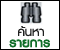
<style>
.page{position:relative;width:60px;height:50px;background:#ffffff}
.page>*{position:absolute;margin:0}
.t1{font:18px "PSLxKittithada-Bold";color:#202020}
.t2{font:18px "PSLxKittithada-Bold";color:#106d28;font-weight:bold}
</style>
<div class="page">
<p class="t1" style="left:18px;top:26px;width:26px;height:11px">ค้นหา</p>
<p class="t2" style="left:9px;top:39px;width:41px;height:9px">รายการ</p>
</div>
